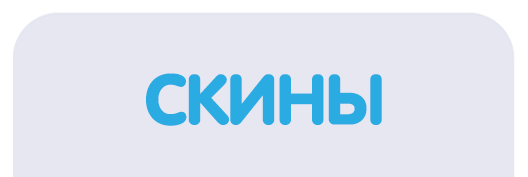
<style>
.page{position:relative;width:528px;height:177px;background:#e7e7f2}
.page>*{position:absolute;margin:0}
.t1{font:70px "VAGWorld-Bold";color:#2aabe2}
</style>
<div class="page">
<p class="t1" style="left:146px;top:73px;width:236px;height:53px">СКИНЫ</p>
</div>
